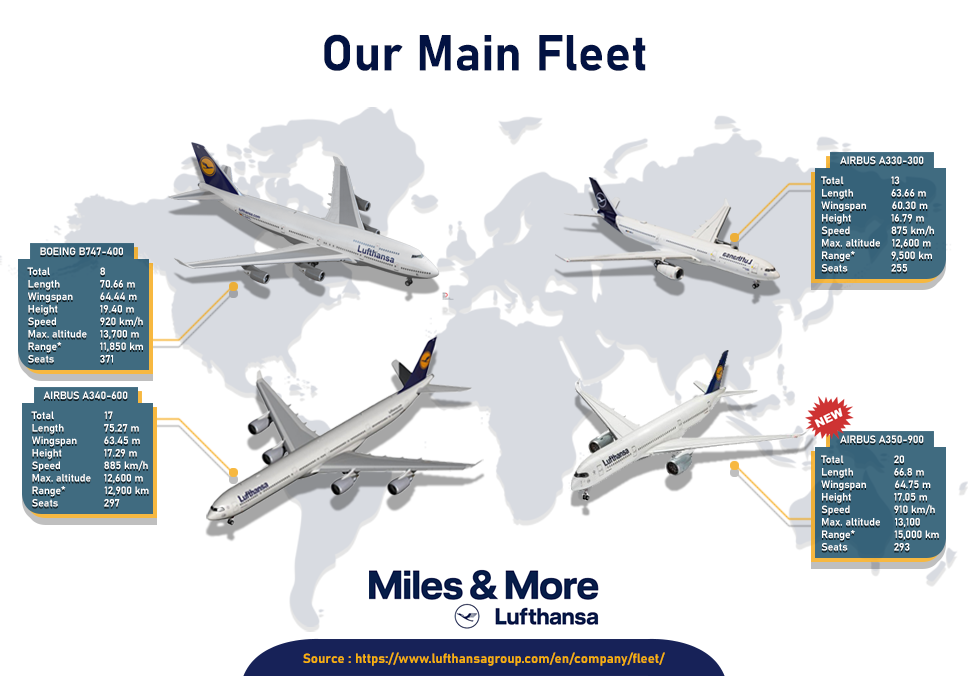
<style>
.page{position:relative;width:968px;height:676px;background:#ffffff}
.page>*{position:absolute;margin:0}
.t1{font:50px "Bahnschrift-Bold";color:#021242}
.t2{font:10.4px "Bahnschrift-SemiBold";color:#ffffff}
.t3{font:13.3px "Bahnschrift-Bold";color:#f9b10b}
</style>
<div class="page">
<p class="t1" style="left:324px;top:34px;width:322px;height:37px">Our Main Fleet</p>
<p class="t2" style="left:840px;top:156px;width:84px;height:8px">AIRBUS A330-300</p>
<p class="t2" style="left:821px;top:176px;width:113px;height:96px">Total             13<br>Length             63.66 m<br>Wingspan         60.30 m<br>Height             16.79 m<br>Speed             875 km/h<br>Max. altitude    12,600 m<br>Range*             9,500 km<br>Seats             255</p>
<p class="t2" style="left:40px;top:247px;width:83px;height:8px">BOEING B747-400</p>
<p class="t2" style="left:27px;top:267px;width:116px;height:96px">Total  8<br>Length  70.66 m<br>Wingspan 64.44 m<br>Height  19.40 m<br>Speed  920 km/h<br>Max. altitude 13,700 m<br>Range*  11,850 km <br>Seats  371</p>
<p class="t2" style="left:43px;top:391px;width:85px;height:8px">AIRBUS A340-600</p>
<p class="t2" style="left:31px;top:411px;width:118px;height:96px">Total              17<br>Length  75.27 m<br>Wingspan 63.45 m<br>Height  17.29 m<br>Speed  885 km/h<br>Max. altitude 12,600 m<br>Range*              12,900 km<br>Seats  297</p>
<p class="t2" style="left:840px;top:435px;width:84px;height:8px">AIRBUS A350-900</p>
<p class="t2" style="left:821px;top:455px;width:118px;height:96px">Total              20<br>Length              66.8 m<br>Wingspan          64.75 m<br>Height              17.05 m<br>Speed              910 km/h<br>Max. altitude     13,100 Range*              15,000 km<br>Seats              293</p>
<p class="t3" style="left:303px;top:652px;width:362px;height:14px">Source : https://www.lufthansagroup.com/en/company/fleet/</p>
</div>
